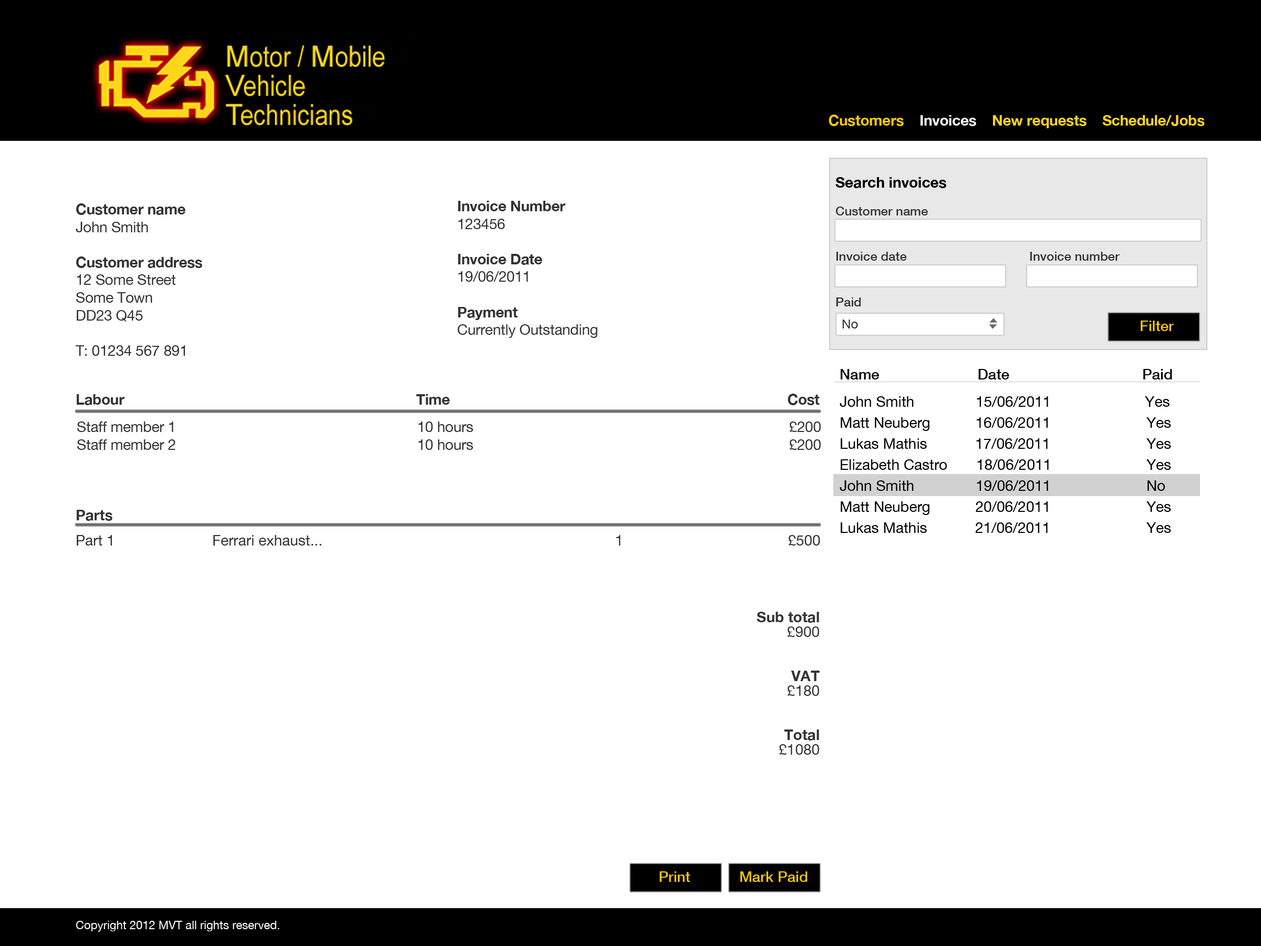
<style>
.page{position:relative;width:1261px;height:946px;background:#ffffff}
.page>*{position:absolute;margin:0}
.t1{font:14.7px "HelveticaNeue-Bold";letter-spacing:-0.012em;color:#ffd619}
.t2{font:14.7px "HelveticaNeue-Bold";letter-spacing:-0.012em;color:#ffcc00}
.t3{font:14.7px "HelveticaNeue-Bold";letter-spacing:-0.012em;color:#ffffff}
.t4{font:14.7px "HelveticaNeue-Bold";color:#000000}
.t5{font:14.7px "HelveticaNeue";letter-spacing:-0.012em;color:#333333}
.t6{font:14.7px "HelveticaNeue-Bold";letter-spacing:-0.012em;color:#333333}
.t7{font:12.6px "HelveticaNeue-Medium";color:#333333}
.t8{font:12.6px "HelveticaNeue";color:#333333}
.t9{font:14.7px "HelveticaNeue-Medium";color:#ffcc00}
.t10{font:14.7px "HelveticaNeue-Medium";color:#000000}
.t11{font:14.7px/21px "HelveticaNeue";color:#000000}
.t12{font:14.7px/12.6px "HelveticaNeue";color:#333333}
.t13{font:14.7px/12.6px "HelveticaNeue-Bold";color:#333333}
.t14{font:14.7px/14.7px "HelveticaNeue-Bold";color:#333333}
.t15{font:14.7px/14.7px "HelveticaNeue";color:#333333}
.t16{font:11.6px "HelveticaNeue";color:#ffffff}
</style>
<div class="page">
<p class="t1" style="left:829px;top:115px;width:376px;height:13px"><span class="t2">Customers    </span><span class="t3">Invoices </span>   New requests    Schedule/Jobs</p>
<p class="t4" style="left:835px;top:177px;width:111px;height:11px">Search invoices</p>
<p class="t5" style="left:76px;top:203px;width:126px;height:153px"><span class="t6">Customer name<br></span>John Smith<br><br><span class="t6">Customer address<br></span>12 Some Street<br>Some Town<br>DD23 Q45<br><br>T: 01234 567 891</p>
<p class="t5" style="left:458px;top:201px;width:139px;height:137px"><span class="t6">Invoice Number<br></span>123456<br><br><span class="t6">Invoice Date<br></span>19/06/2011<br><br><span class="t6">Payment<br></span>Currently Outstanding</p>
<p class="t7" style="left:835px;top:206px;width:285px;height:100px">Customer name<br><br><br>Invoice date                                   Invoice number<br><br><br>Paid</p>
<p class="t8" style="left:842px;top:319px;width:16px;height:9px">No</p>
<p class="t9" style="left:1141px;top:320px;width:33px;height:11px">Filter</p>
<p class="t10" style="left:841px;top:369px;width:331px;height:10px">Name                        Date        Paid</p>
<p class="t6" style="left:77px;top:394px;width:743px;height:11px">Labour                 Time                     Cost</p>
<p class="t11" style="left:840px;top:396px;width:331px;height:137px;text-align:justify">John Smith               15/06/2011                       Yes<br>Matt Neuberg           16/06/2011      Yes<br>Lukas Mathis           17/06/2011      Yes<br>Elizabeth Castro       18/06/2011      Yes<br>John Smith               19/06/2011      No<br>Matt Neuberg           20/06/2011      Yes<br>Lukas Mathis           21/06/2011      Yes</p>
<p class="t5" style="left:77px;top:421px;width:744px;height:29px">Staff member 1              10 hours                        £200<br>Staff member 2              10 hours                        £200</p>
<p class="t12" style="left:77px;top:510px;width:743px;height:35px"><span class="t13">Parts<br><br></span>Part 1      Ferrari exhaust...                      1            £500</p>
<p class="t14" style="left:757px;top:612px;width:63px;height:142px;text-align:right">Sub total<br><span class="t15">£900<br><br><br></span>VAT<br><span class="t15">£180<br><br><br></span>Total<br><span class="t15">£1080</span></p>
<p class="t9" style="left:659px;top:871px;width:31px;height:11px">Print</p>
<p class="t9" style="left:740px;top:871px;width:68px;height:11px">Mark Paid</p>
<p class="t16" style="left:76px;top:920px;width:204px;height:12px">Copyright 2012 MVT all rights reserved.</p>
</div>
